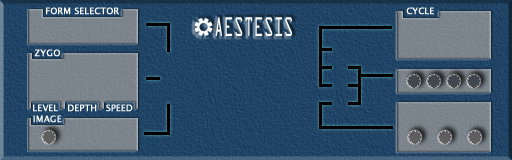
<style>
.page{position:relative;width:512px;height:160px}
.page>*{position:absolute;margin:0}
.t1{font:9px "LucidaSansUnicode";color:#fefefe;font-weight:bold}
.t2{font:28.8px "OCRAExtended";color:#fefefe;scale:0.57 1}
</style>
<div class="page">
<p class="t1" style="left:46px;top:7px;width:73px;height:8px">FORM SELECTOR</p>
<p class="t2" style="left:215px;top:17px;width:77px;height:19px">AESTESIS</p>
<p class="t1" style="left:406px;top:7px;width:28px;height:8px">CYCLE</p>
<p class="t1" style="left:34px;top:49px;width:26px;height:8px">ZYGO</p>
<p class="t1" style="left:33px;top:104px;width:25px;height:8px">LEVEL</p>
<p class="t1" style="left:68px;top:104px;width:29px;height:8px">DEPTH</p>
<p class="t1" style="left:106px;top:104px;width:27px;height:8px">SPEED</p>
<p class="t1" style="left:33px;top:115px;width:29px;height:8px">IMAGE</p>
</div>
